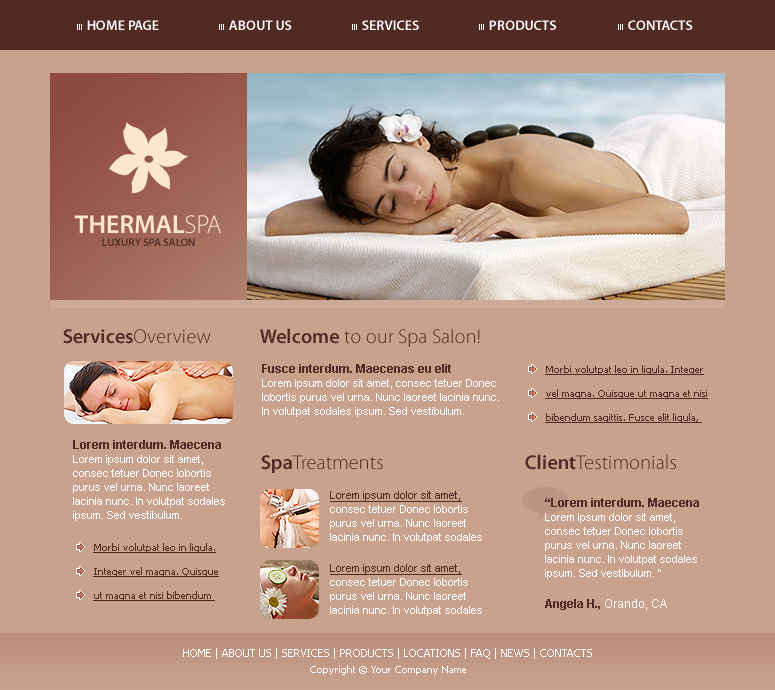
<style>
.page{position:relative;width:775px;height:690px;background:#c8a28d}
.page>*{position:absolute;margin:0}
.t1{font:14px "MyriadPro-Semibold";color:#ffffff;text-transform:uppercase}
.t2{font:26px "MyriadPro-Semibold";color:#fce7ca;text-transform:uppercase}
.t3{font:26px "MyriadPro-Light";color:#fce7ca;text-transform:uppercase}
.t4{font:11px "MyriadPro-Semibold";color:#502a23;text-transform:uppercase}
.t5{font:20px "MyriadPro-Semibold";color:#502a23}
.t6{font:20px "MyriadPro-Light";color:#502a23}
.t7{font:11px/14px "ArialMT";color:#ffffff}
.t8{font:12px/14px "Arial-BoldMT";color:#502a23}
.t9{font:10px/24px "Tahoma";color:#502a23;text-decoration:underline}
.t10{font:11px/14px "ArialMT";color:#502a23;text-decoration:underline}
.t11{font:12px "Arial-BoldMT";color:#502a23}
.t12{font:12px "ArialMT";color:#ffffff}
.t13{font:11px/16px "Tahoma";color:#ffffff}
.t14{font:10px/16px "Tahoma";color:#ffffff}
</style>
<div class="page">
<p class="t1" style="left:87px;top:20px;width:72px;height:10px">HOME PAGE</p>
<p class="t1" style="left:229px;top:20px;width:63px;height:10px">ABOUT US</p>
<p class="t1" style="left:362px;top:20px;width:57px;height:10px">SERVICES</p>
<p class="t1" style="left:489px;top:20px;width:67px;height:10px">PRODUCTS</p>
<p class="t1" style="left:628px;top:20px;width:65px;height:10px">CONTACTS</p>
<p class="t2" style="left:74px;top:215px;width:147px;height:19px">THERMAL<span class="t3">SPA</span></p>
<p class="t4" style="left:102px;top:238px;width:93px;height:8px">LUXURY SPA SALON</p>
<p class="t5" style="left:63px;top:329px;width:148px;height:15px">Services<span class="t6">Overview</span></p>
<p class="t6" style="left:260px;top:328px;width:220px;height:19px"><span class="t5">Welcome </span>to our Spa Salon!</p>
<p class="t7" style="left:262px;top:364px;width:237px;height:53px"><span class="t8">Fusce interdum. Maecenas eu elit <br></span>Lorem ipsum dolor sit amet, consec tetuer Donec lobortis purus vel urna. Nunc laoreet lacinia nunc. In volutpat sodales ipsum. Sed vestibulum.</p>
<p class="t9" style="left:545px;top:365px;width:163px;height:58px">Morbi volutpat leo in ligula. Integer vel magna. Quisque ut magna et nisi bibendum sagittis. Fusce elit ligula,</p>
<p class="t7" style="left:73px;top:440px;width:152px;height:81px"><span class="t8">Lorem interdum. Maecena<br></span>Lorem ipsum dolor sit amet, consec tetuer Donec lobortis purus vel urna. Nunc laoreet lacinia nunc. In volutpat sodales ipsum. Sed vestibulum.</p>
<p class="t6" style="left:261px;top:455px;width:122px;height:18px"><span class="t5">Spa</span>Treatments</p>
<p class="t6" style="left:525px;top:454px;width:151px;height:16px"><span class="t5">Client</span>Testimonials</p>
<p class="t7" style="left:330px;top:491px;width:152px;height:52px"><span class="t10">Lorem ipsum dolor sit amet, </span>consec tetuer Donec lobortis purus vel urna. Nunc laoreet lacinia nunc. In volutpat sodales</p>
<p class="t7" style="left:545px;top:498px;width:154px;height:81px"><span class="t8">“Lorem interdum. Maecena<br></span>Lorem ipsum dolor sit amet, consec tetuer Donec lobortis purus vel urna. Nunc laoreet lacinia nunc. In volutpat sodales ipsum. Sed vestibulum. ”</p>
<p class="t9" style="left:93px;top:543px;width:126px;height:58px">Morbi volutpat leo in ligula. Integer vel magna. Quisque ut magna et nisi bibendum</p>
<p class="t7" style="left:330px;top:564px;width:152px;height:52px"><span class="t10">Lorem ipsum dolor sit amet, </span>consec tetuer Donec lobortis purus vel urna. Nunc laoreet lacinia nunc. In volutpat sodales</p>
<p class="t11" style="left:545px;top:599px;width:122px;height:11px">Angela H., <span class="t12">Orando, CA</span></p>
<p class="t13" style="left:183px;top:648px;width:409px;height:27px;text-align:center">HOME | ABOUT US | SERVICES | PRODUCTS | LOCATIONS | FAQ | NEWS | CONTACTS<br><span class="t14">Copyright © Your Company Name</span></p>
</div>
